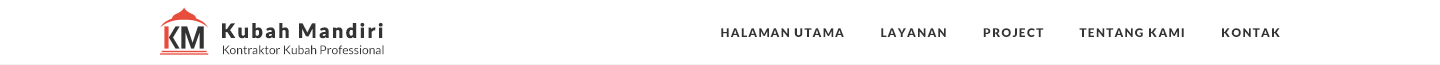
<style>
.page{position:relative;width:1440px;height:65px;background:#ffffff}
.page>*{position:absolute;margin:0}
.t1{font:20px "Lato-Black";letter-spacing:0.11em;color:#333333}
.t2{font:12px "Lato-Black";letter-spacing:0.1em;color:#333333}
.t3{font:12px "Lato-Regular";color:#333333}
</style>
<div class="page">
<p class="t1" style="left:222px;top:22px;width:161px;height:17px">Kubah Mandiri</p>
<p class="t2" style="left:721px;top:28px;width:559px;height:9px">HALAMAN UTAMA           LAYANAN           PROJECT           TENTANG KAMI           KONTAK</p>
<p class="t3" style="left:223px;top:45px;width:161px;height:10px">Kontraktor Kubah Professional</p>
</div>
